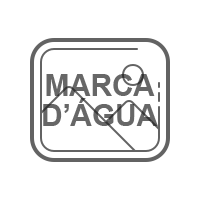
<style>
.page{position:relative;width:200px;height:200px;background:#ffffff}
.page>*{position:absolute;margin:0}
.t1{font:30px/30px "Arial-BoldMT";letter-spacing:-0.01em;color:#676767}
</style>
<div class="page">
<p class="t1" style="left:43px;top:74px;width:115px;height:52px;text-align:center">MARCA<br>D’ÁGUA</p>
</div>
